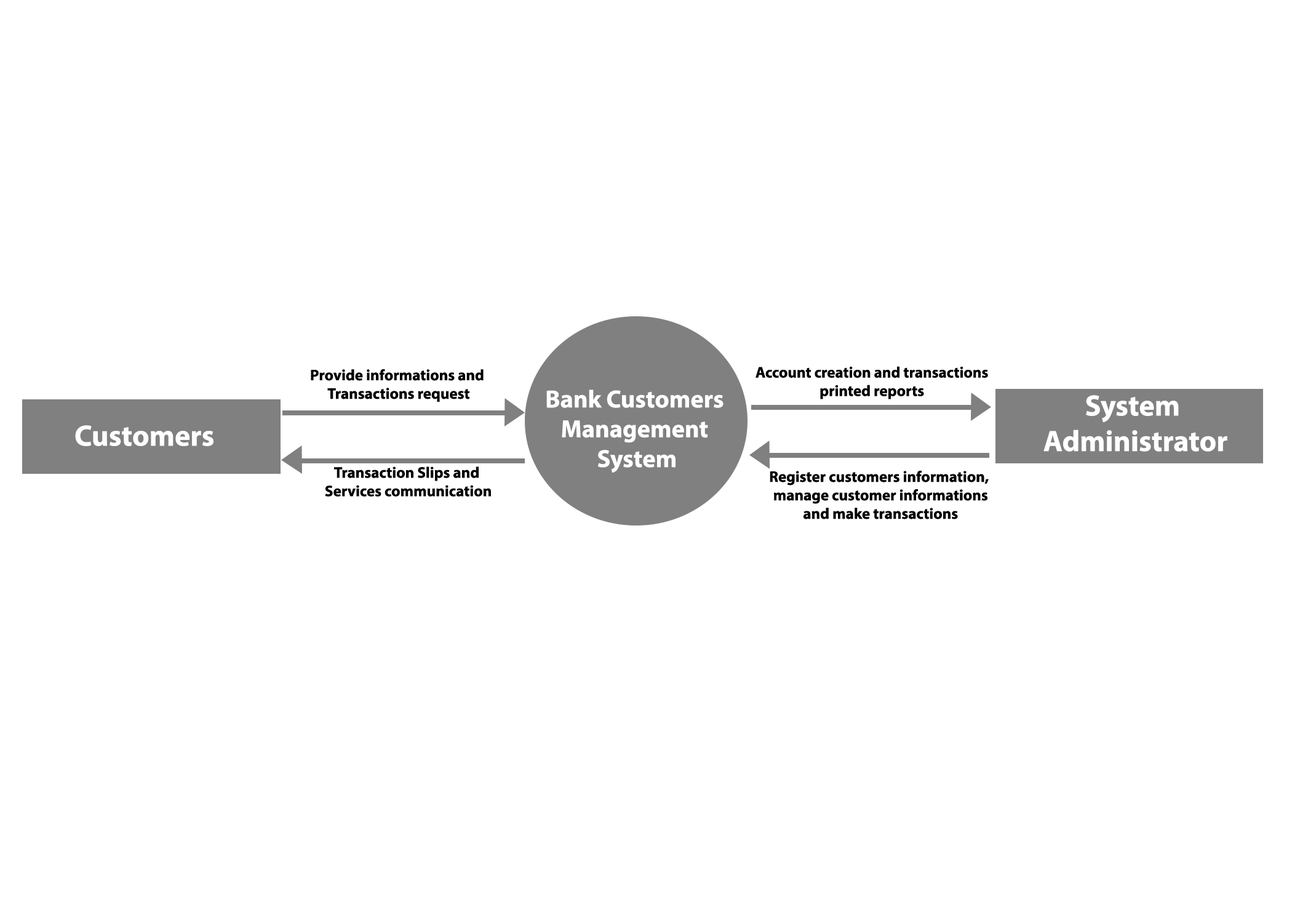
<style>
.page{position:relative;width:1292px;height:923px;background:#ffffff}
.page>*{position:absolute;margin:0}
.t1{font:15.4px "MyriadConceptRoman-Bold";color:#000000;font-weight:bold}
.t2{font:24.8px "MyriadConceptRoman-Bold";color:#ffffff;font-weight:bold}
.t3{font:29.6px "MyriadConceptRoman-Bold";color:#ffffff;font-weight:bold}
</style>
<div class="page">
<p class="t1" style="left:311px;top:369px;width:173px;height:33px;text-align:center">Provide informations and <br>Transactions request</p>
<p class="t1" style="left:756px;top:366px;width:232px;height:33px;text-align:center">Account creation and transactions<br>printed reports</p>
<p class="t2" style="left:546px;top:389px;width:178px;height:84px;text-align:center">Bank Customers <br>Management <br>System</p>
<p class="t3" style="left:1043px;top:395px;width:184px;height:57px;text-align:center">System <br>Administrator</p>
<p class="t3" style="left:75px;top:425px;width:138px;height:21px">Customers</p>
<p class="t1" style="left:325px;top:466px;width:166px;height:31px;text-align:center">Transaction Slips and <br>Services communication</p>
<p class="t1" style="left:770px;top:471px;width:219px;height:48px;text-align:center">Register customers information, <br>manage customer informations<br>and make transactions</p>
</div>
